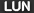
<style>
.page{position:relative;width:34px;height:13px}
.page>*{position:absolute;margin:0}
.t1{font:13.9px "K2D-ExtraBold";color:#ffffff}
</style>
<div class="page">
<p class="t1" style="left:4px;top:1px;width:26px;height:11px">LUN</p>
</div>
